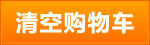
<style>
.page{position:relative;width:150px;height:45px}
.page>*{position:absolute;margin:0}
.t1{font:22.4px "MicrosoftYaHei-Bold";letter-spacing:0.075em;color:#ffffff}
</style>
<div class="page">
<p class="t1" style="left:15px;top:11px;width:119px;height:23px">清空购物车</p>
</div>
